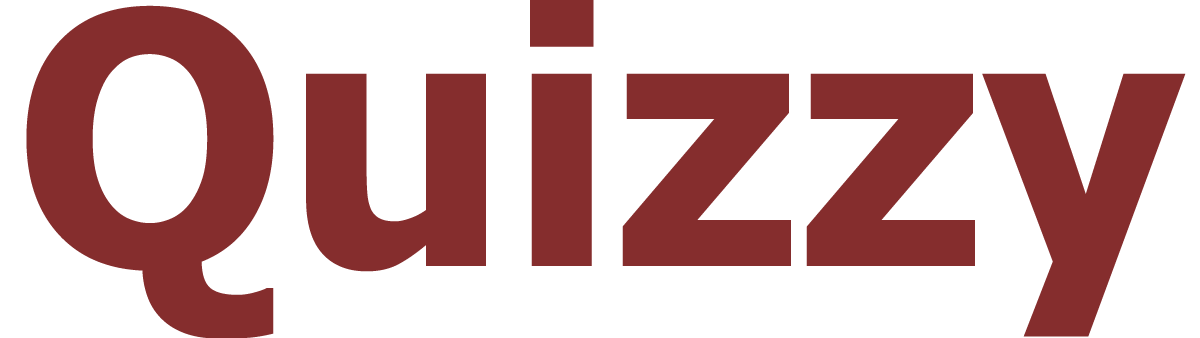
<style>
.page{position:relative;width:1200px;height:338px;background:#ffffff}
.page>*{position:absolute;margin:0}
.t1{font:350.2px "Tahoma-Bold";color:#852d2d}
</style>
<div class="page">
<p class="t1" style="left:26px;top:0px;width:1160px;height:339px">Quizzy</p>
</div>
